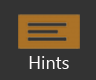
<style>
.page{position:relative;width:96px;height:80px;background:#333333}
.page>*{position:absolute;margin:0}
.t1{font:18px "SegoeUI";color:#fdfafa}
</style>
<div class="page">
<p class="t1" style="left:29px;top:56px;width:40px;height:13px">Hints</p>
</div>
